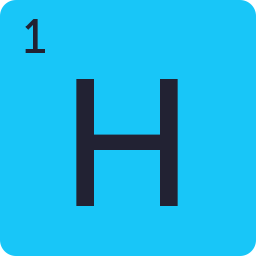
<style>
.page{position:relative;width:256px;height:256px;background:#18c6f8}
.page>*{position:absolute;margin:0}
.t1{font:48px "MuseoSlab-500";color:#222233}
.t2{font:180px "MuseoSans-500";color:#222233}
</style>
<div class="page">
<p class="t1" style="left:25px;top:19px;width:20px;height:34px">1</p>
<p class="t2" style="left:76px;top:79px;width:102px;height:127px">H</p>
</div>
